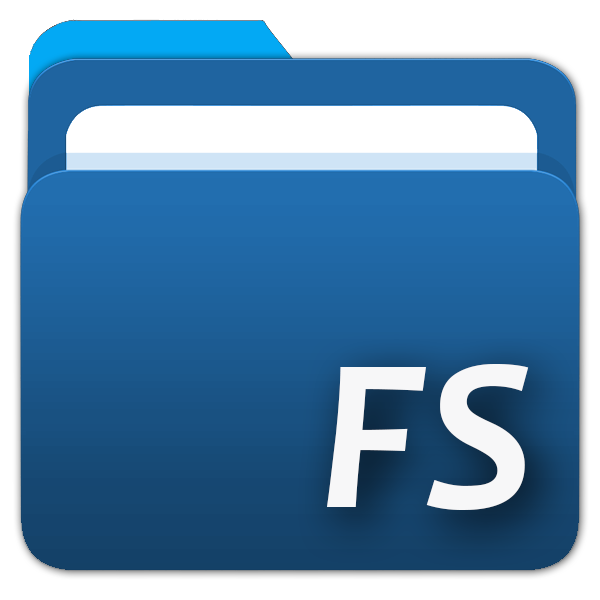
<style>
.page{position:relative;width:600px;height:600px}
.page>*{position:absolute;margin:0}
.t1{font:220px "Candara-BoldItalic";color:#f7f7f8}
</style>
<div class="page">
<p class="t1" style="left:327px;top:364px;width:202px;height:146px">FS</p>
</div>
